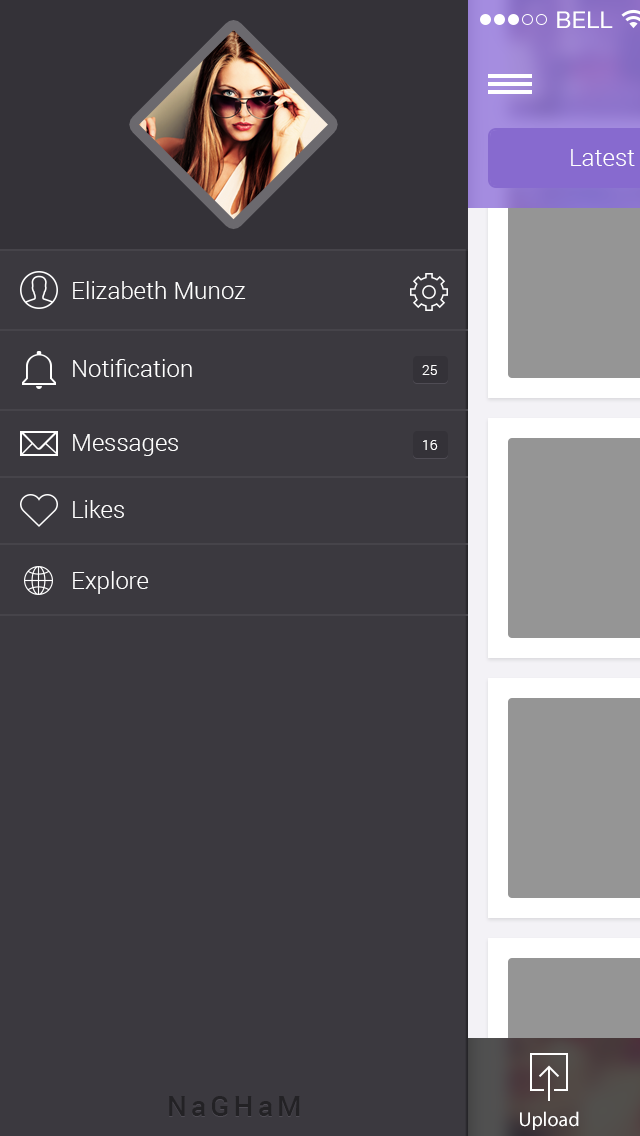
<style>
.page{position:relative;width:640px;height:1136px;background:#3b393f}
.page>*{position:absolute;margin:0}
.t1{font:23px "HelveticaNeue";letter-spacing:0.02em;color:#ffffff}
.t2{font:24px "Roboto-Light";color:#ffffff}
.t3{font:14px "Roboto-Light";color:#ffffff}
.t4{font:28px "Roboto-Medium";letter-spacing:0.15em;color:#232225}
.t5{font:20px "MyriadPro-Regular";color:#ffffff}
</style>
<div class="page">
<p class="t1" style="left:557px;top:11px;width:56px;height:17px">BELL</p>
<p class="t2" style="left:73px;top:281px;width:173px;height:18px">Elizabeth Munoz</p>
<p class="t2" style="left:73px;top:359px;width:119px;height:18px">Notification</p>
<p class="t3" style="left:422px;top:365px;width:15px;height:10px">25</p>
<p class="t2" style="left:73px;top:434px;width:105px;height:22px">Messages</p>
<p class="t3" style="left:423px;top:440px;width:15px;height:10px">16</p>
<p class="t2" style="left:73px;top:500px;width:51px;height:18px">Likes</p>
<p class="t2" style="left:73px;top:571px;width:76px;height:23px">Explore</p>
<p class="t4" style="left:169px;top:1096px;width:131px;height:20px">NaGHaM</p>
<p class="t5" style="left:520px;top:1111px;width:59px;height:19px">Upload</p>
</div>
